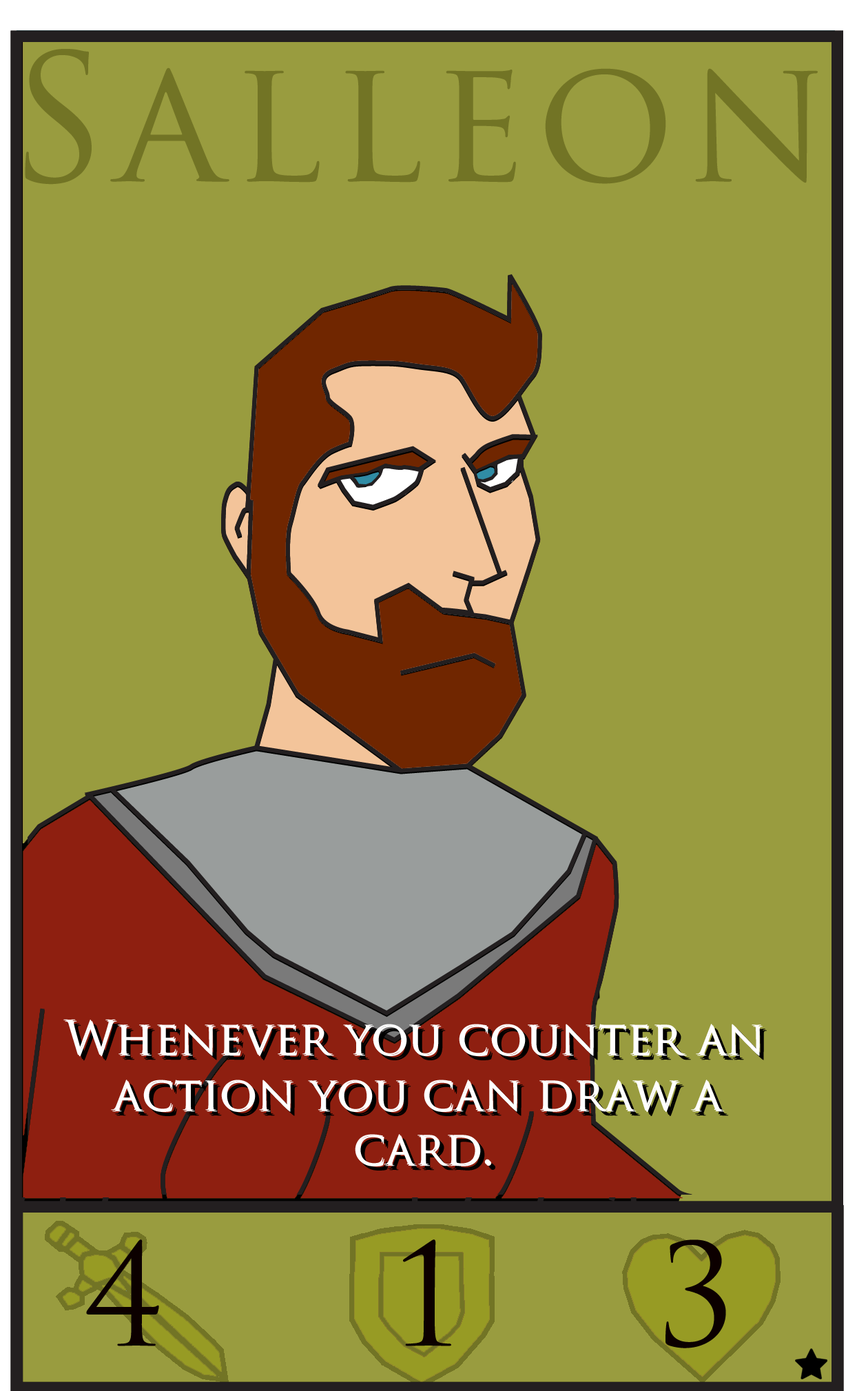
<style>
.page{position:relative;width:857px;height:1391px;background:#999c3f}
.page>*{position:absolute;margin:0}
.t1{font:45.9px "TrajanPro-Regular";color:#ffffff}
.t2{font:45.9px "TrajanPro-Regular";color:#000000}
</style>
<div class="page">
<p class="t1" style="left:63px;top:1019px;width:698px;height:37px">Whenever you counter an</p>
<p class="t1" style="left:65px;top:1020px;width:698px;height:37px">Whenever you counter an</p>
<p class="t2" style="left:69px;top:1025px;width:698px;height:36px">Whenever you counter an</p>
<p class="t1" style="left:111px;top:1080px;width:612px;height:31px">action you can draw a</p>
<p class="t1" style="left:112px;top:1081px;width:613px;height:31px">action you can draw a</p>
<p class="t2" style="left:116px;top:1085px;width:613px;height:31px">action you can draw a</p>
<p class="t1" style="left:355px;top:1134px;width:135px;height:31px">card.</p>
<p class="t1" style="left:356px;top:1136px;width:135px;height:31px">card.</p>
<p class="t2" style="left:360px;top:1140px;width:135px;height:31px">card.</p>
</div>
